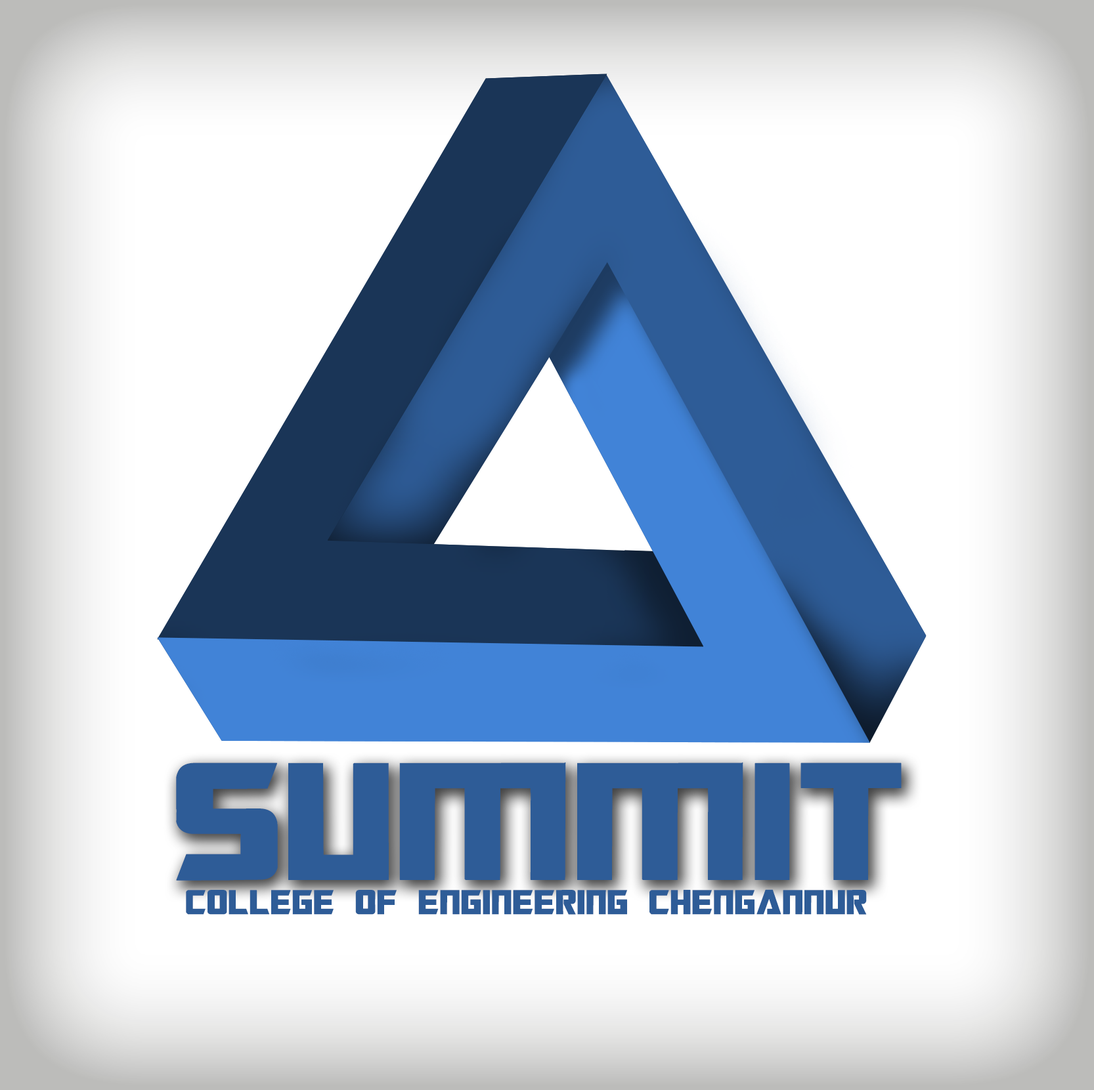
<style>
.page{position:relative;width:1094px;height:1090px;background:#ffffff}
.page>*{position:absolute;margin:0}
.t1{font:186.2px "Transformers";color:#2e5c97;font-weight:bold;scale:1.08 1}
.t2{font:38.3px "Transformers";color:#2e5c97;font-weight:bold}
</style>
<div class="page">
<p class="t1" style="left:176px;top:762px;width:725px;height:119px">SUMMIT</p>
<p class="t2" style="left:186px;top:889px;width:680px;height:26px">COLLEGE OF ENGINEERING CHENGANNUR</p>
</div>
